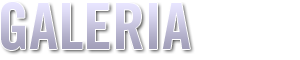
<style>
.page{position:relative;width:300px;height:60px;background:#ffffff}
.page>*{position:absolute;margin:0}
.t1{font:63.8px "TradeGothicLTStd-BdCn20";text-transform:uppercase}
</style>
<div class="page">
<p class="t1" style="left:1px;top:2px;width:189px;height:48px">Galeria</p>
</div>
